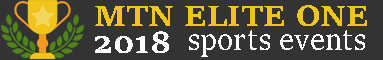
<style>
.page{position:relative;width:383px;height:60px;background:#333333}
.page>*{position:absolute;margin:0}
.t1{font:32px "SitkaText-Bold";color:#f0c419;scale:1.05 1}
.t2{font:32px "SitkaText";color:#fefefd;scale:0.9 1}
.t3{font:32px "SitkaText-Bold";color:#fefefd;scale:1.04 1}
</style>
<div class="page">
<p class="t1" style="left:95px;top:5px;width:272px;height:21px">MTN ELITE ONE</p>
<p class="t2" style="left:189px;top:30px;width:176px;height:27px">sports events</p>
<p class="t3" style="left:95px;top:31px;width:74px;height:22px">2018</p>
</div>
